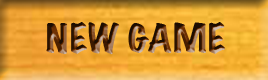
<style>
.page{position:relative;width:268px;height:80px}
.page>*{position:absolute;margin:0}
.t1{font:36px "MarkerFelt-Wide"}
</style>
<div class="page">
<p class="t1" style="left:46px;top:22px;width:179px;height:33px">NEW GAME</p>
</div>
